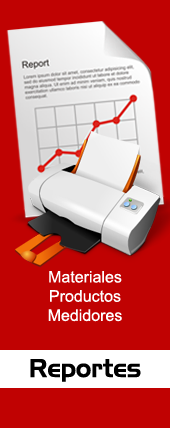
<style>
.page{position:relative;width:170px;height:428px;background:#c00202}
.page>*{position:absolute;margin:0}
.t1{font:16px "ArialMT";color:#ffffff}
.t2{font:25px "AeroRegularSWFTE";color:#000000}
</style>
<div class="page">
<p class="t1" style="left:48px;top:271px;width:74px;height:51px;text-align:center">Materiales<br>Productos<br>Medidores</p>
<p class="t2" style="left:30px;top:359px;width:111px;height:23px">Reportes</p>
</div>
